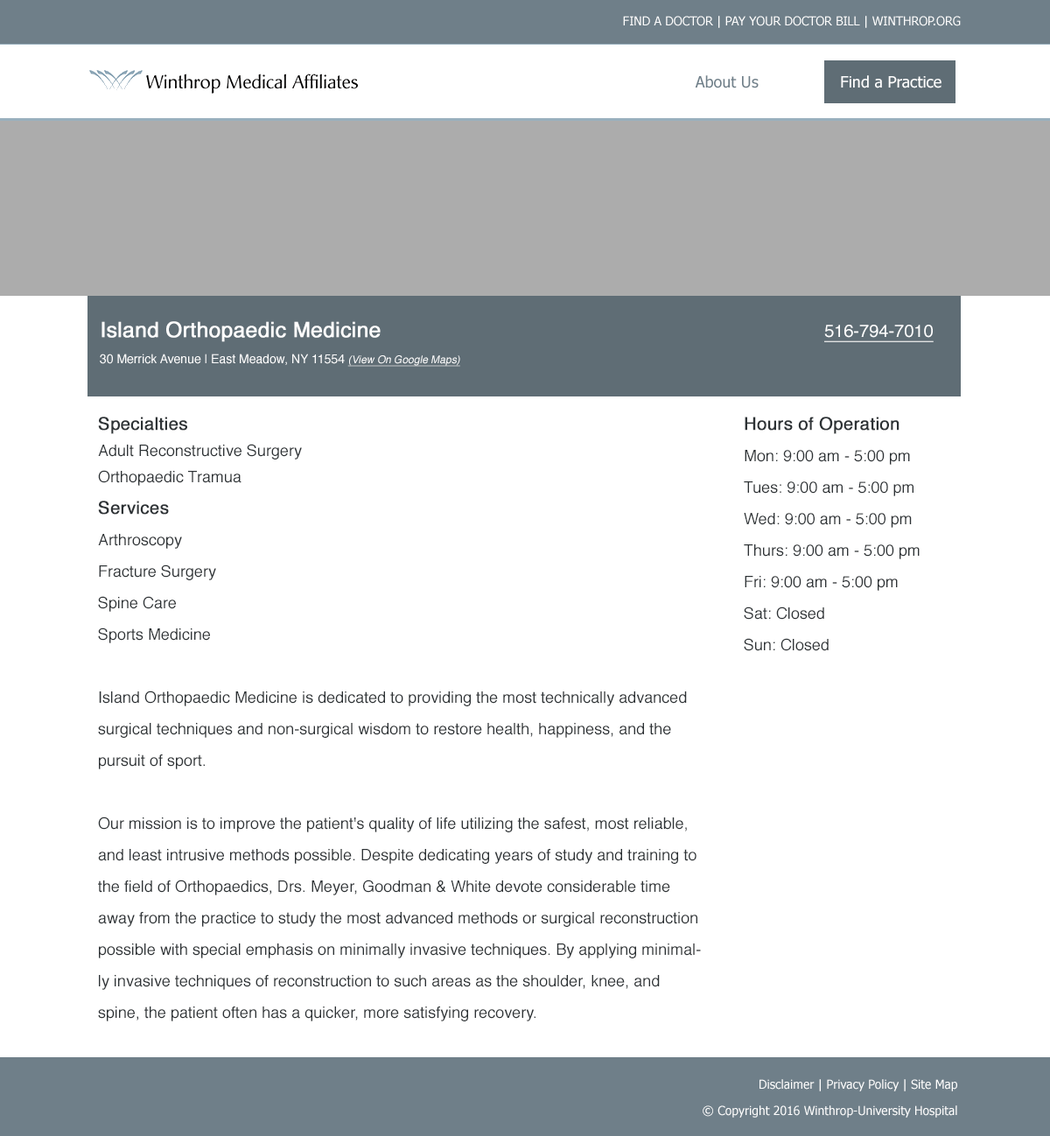
<style>
.page{position:relative;width:1050px;height:1136px;background:#ffffff}
.page>*{position:absolute;margin:0}
.t1{font:12.2px "Tahoma";color:#ffffff;text-transform:uppercase}
.t2{font:12.2px/26.2px "Helvetica";color:#ffffff}
.t3{font:21px/26.2px "Helvetica";color:#ffffff;font-weight:bold}
.t4{font:17.5px/26.2px "Helvetica";color:#ffffff;text-decoration:underline}
.t5{font:10.5px/26.2px "Helvetica";color:#ffffff;font-style:italic;text-decoration:underline}
.t6{font:15.7px/31.5px "Helvetica";color:#2d3235}
.t7{font:17.5px/31.5px "Helvetica";color:#2d3235;font-weight:bold}
.t8{font:15.7px/26.2px "Helvetica";color:#2d3235}
.t9{font:12.2px/26.2px "Tahoma";color:#ffffff}
</style>
<div class="page">
<p class="t1" style="left:623px;top:16px;width:338px;height:12px">Find a doctor | Pay Your Doctor Bill | winthrop.org</p>
<p class="t2" style="left:100px;top:321px;width:834px;height:46px"><span class="t3">Island Orthopaedic Medicine                 </span><span class="t4">516-794-7010<br></span>30 Merrick Avenue | East Meadow, NY 11554 <span class="t5">(View On Google Maps)</span></p>
<p class="t6" style="left:98px;top:416px;width:603px;height:605px"><span class="t7">Specialties<br></span><span class="t8">Adult Reconstructive Surgery<br>Orthopaedic Tramua<br></span><span class="t7">Services<br></span>Arthroscopy<br>Fracture Surgery<br>Spine Care<br>Sports Medicine<br><br>Island Orthopaedic Medicine is dedicated to providing the most technically advanced surgical techniques and non-surgical wisdom to restore health, happiness, and the pursuit of sport.<br><br>Our mission is to improve the patient's quality of life utilizing the safest, most reliable, and least intrusive methods possible. Despite dedicating years of study and training to the field of Orthopaedics, Drs. Meyer, Goodman &amp; White devote considerable time away from the practice to study the most advanced methods or surgical reconstruction possible with special emphasis on minimally invasive techniques. By applying minimally invasive techniques of reconstruction to such areas as the shoulder, knee, and spine, the patient often has a quicker, more satisfying recovery.</p>
<p class="t6" style="left:744px;top:416px;width:176px;height:235px"><span class="t7">Hours of Operation<br></span>Mon: 9:00 am - 5:00 pm<br>Tues: 9:00 am - 5:00 pm<br>Wed: 9:00 am - 5:00 pm<br>Thurs: 9:00 am - 5:00 pm<br>Fri: 9:00 am - 5:00 pm<br>Sat: Closed<br>Sun: Closed</p>
<p class="t9" style="left:703px;top:1079px;width:254px;height:38px;text-align:right">Disclaimer | Privacy Policy | Site Map<br>© Copyright 2016 Winthrop-University Hospital</p>
</div>
